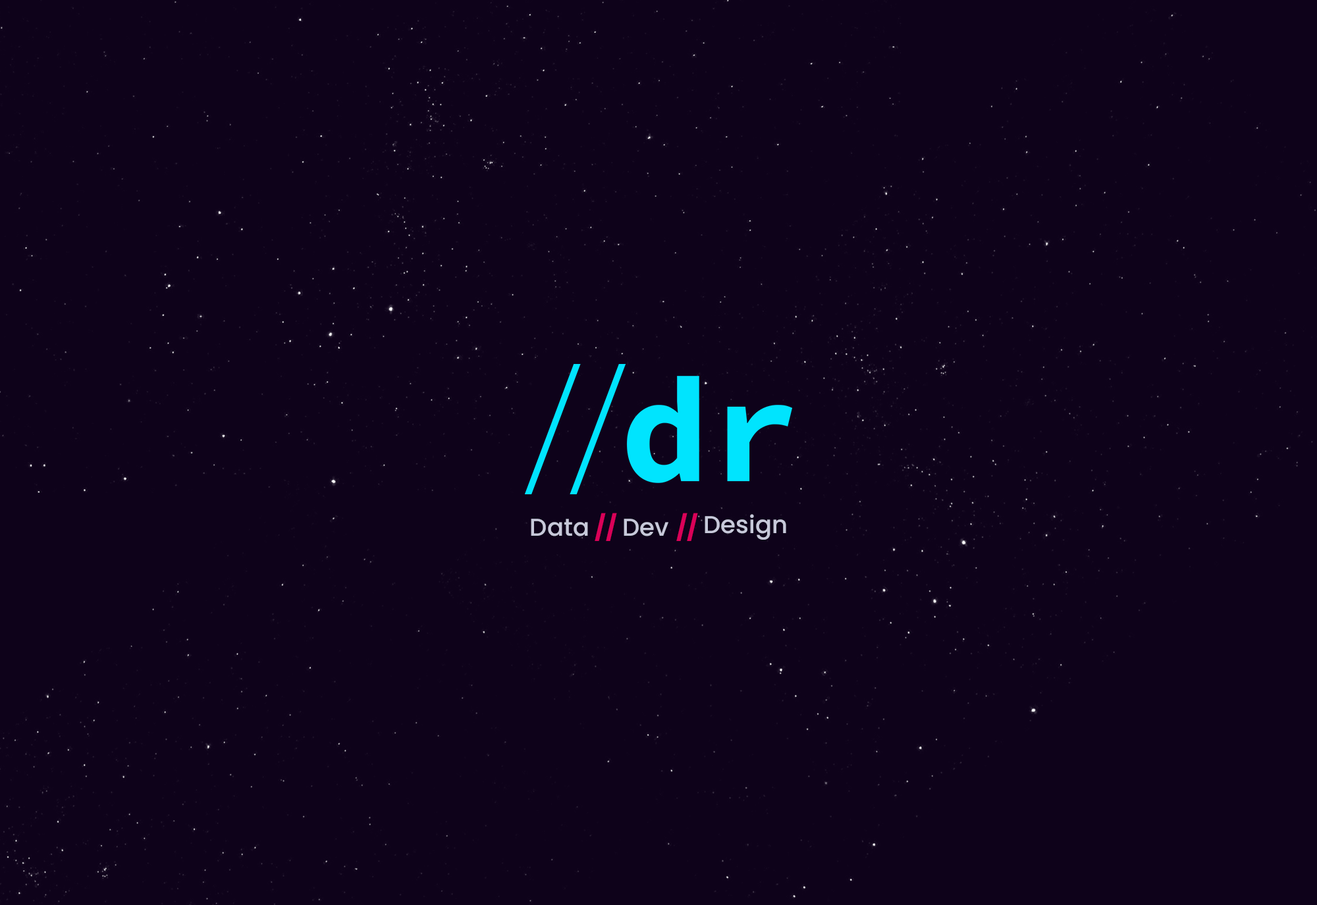
<style>
.page{position:relative;width:1317px;height:905px;background:#0e021a}
.page>*{position:absolute;margin:0}
.t1{font:24.4px "Poppins-Medium";color:#c7c9da}
.t2{font:24.4px "Poppins-Bold";color:#da0158}
</style>
<div class="page">
<p class="t1" style="left:531px;top:519px;width:57px;height:18px">Data</p>
<p class="t2" style="left:595px;top:513px;width:22px;height:28px">//</p>
<p class="t1" style="left:624px;top:519px;width:44px;height:18px">Dev</p>
<p class="t2" style="left:676px;top:513px;width:22px;height:28px">//</p>
<p class="t1" style="left:705px;top:514px;width:81px;height:26px">Design</p>
</div>
